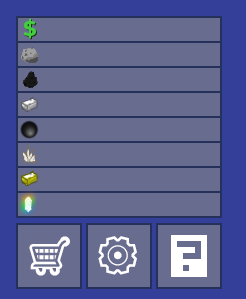
<style>
.page{position:relative;width:246px;height:299px;background:#686c8f}
.page>*{position:absolute;margin:0}
.t1{font:21px "Montserrat-Bold";color:#41cf3e}
.t2{font:21px "Montserrat-Bold"}
.t3{font:48px "PressStart2P-Regular";color:#ffffff}
</style>
<div class="page">
<p class="t1" style="left:23px;top:18px;width:13px;height:21px">$</p>
<p class="t2" style="left:24px;top:19px;width:13px;height:21px">$</p>
<p class="t3" style="left:171px;top:235px;width:36px;height:42px">⚙</p>
</div>
